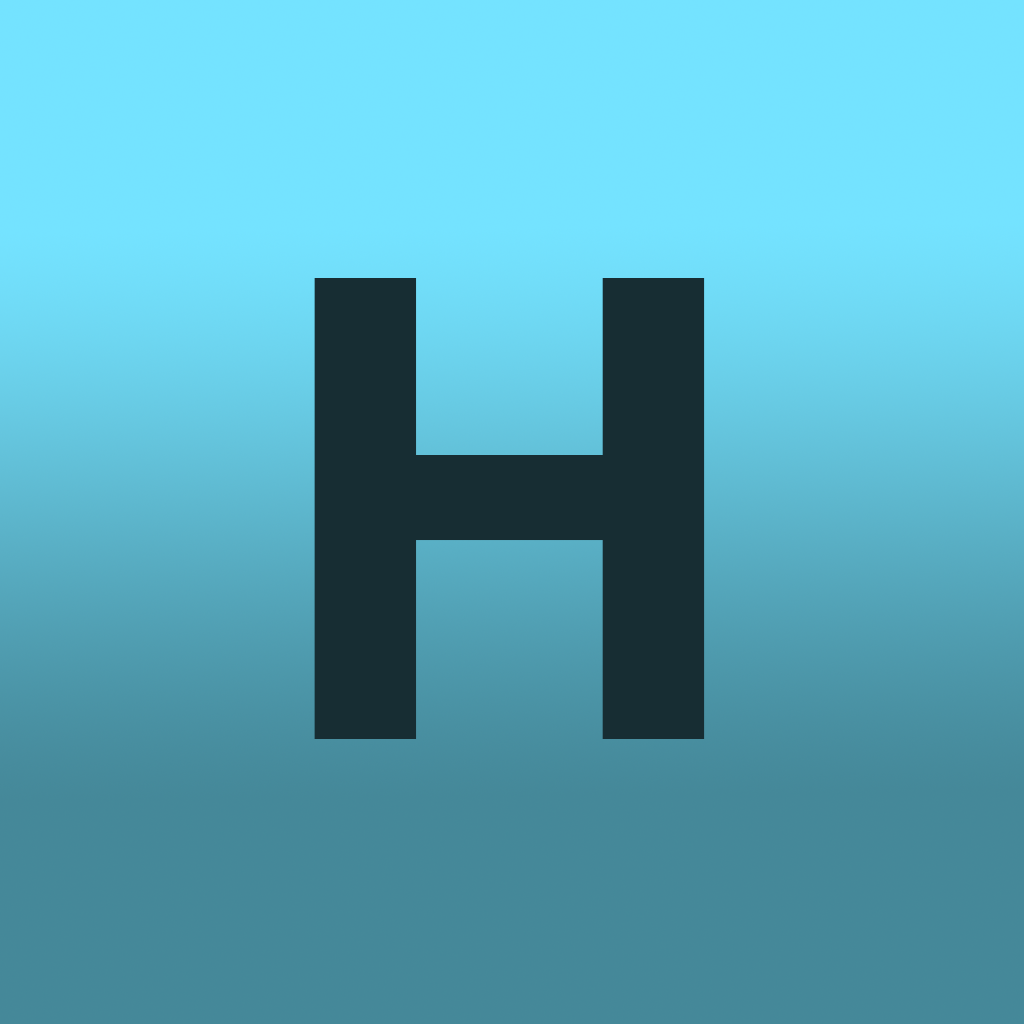
<style>
.page{position:relative;width:1024px;height:1024px}
.page>*{position:absolute;margin:0}
.t1{font:646px "HelveticaNeue-Bold";color:#172d33}
</style>
<div class="page">
<p class="t1" style="left:314px;top:278px;width:391px;height:461px">H</p>
</div>
